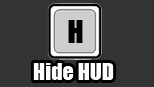
<style>
.page{position:relative;width:154px;height:87px;background:#333333}
.page>*{position:absolute;margin:0}
.t1{font:29.3px "Impact";color:#000000}
.t2{font:21.9px "Impact";color:#ffffff}
</style>
<div class="page">
<p class="t1" style="left:68px;top:20px;width:15px;height:23px">H</p>
<p class="t2" style="left:33px;top:63px;width:81px;height:17px">Hide HUD</p>
</div>
